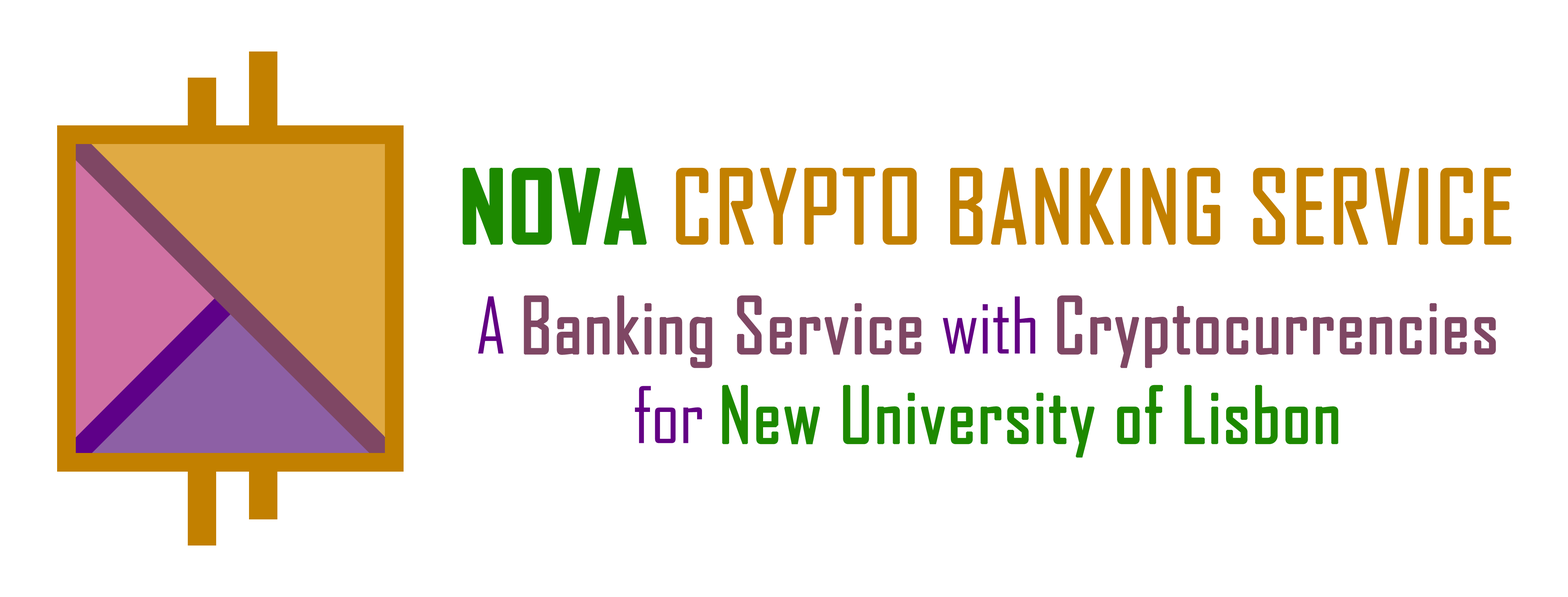
<style>
.page{position:relative;width:1568px;height:597px;background:#ffffff}
.page>*{position:absolute;margin:0}
.t1{font:97.1px "AgencyFB-Reg";color:#c28000;font-weight:bold}
.t2{font:97.1px "AgencyFB-Bold";color:#1d8900;font-weight:bold}
.t3{font:74.7px "AgencyFB-Reg";color:#1d8900;font-weight:bold}
.t4{font:74.7px "AgencyFB-Reg";color:#630084}
.t5{font:74.7px "AgencyFB-Reg";color:#7f4764;font-weight:bold}
</style>
<div class="page">
<p class="t1" style="left:463px;top:168px;width:1048px;height:77px"><span class="t2">NOVA</span> CRYPTO BANKING SERVICE</p>
<p class="t3" style="left:478px;top:295px;width:1018px;height:163px;text-align:center"><span class="t4">A </span><span class="t5">Banking Service</span><span class="t4"> with </span><span class="t5">Cryptocurrencies</span><span class="t4"> for </span>New University of Lisbon</p>
</div>
